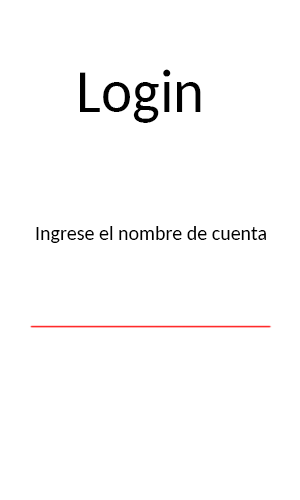
<style>
.page{position:relative;width:300px;height:500px;background:#ffffff}
.page>*{position:absolute;margin:0}
.t1{font:61.2px "Carlito";color:#000000;scale:0.96 1}
.t2{font:20px "Carlito";color:#000000}
</style>
<div class="page">
<p class="t1" style="left:80px;top:69px;width:121px;height:54px">Login</p>
<p class="t2" style="left:36px;top:226px;width:230px;height:17px">Ingrese el nombre de cuenta</p>
</div>
